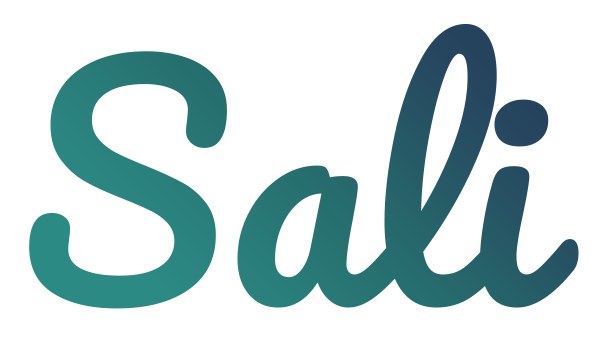
<style>
.page{position:relative;width:602px;height:350px;background:#ffffff}
.page>*{position:absolute;margin:0}
.t1{font:300px "Pacifico-Regular"}
</style>
<div class="page">
<p class="t1" style="left:29px;top:24px;width:550px;height:285px">Sali</p>
</div>
